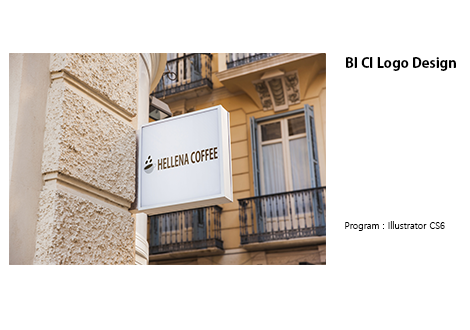
<style>
.page{position:relative;width:470px;height:330px;background:#ffffff}
.page>*{position:absolute;margin:0}
.t1{font:14px "AdobeGothicStd-Bold";color:#000000}
.t2{font:9px "MalgunGothic";color:#000000}
</style>
<div class="page">
<p class="t1" style="left:346px;top:57px;width:110px;height:14px">BI CI Logo Design</p>
<p class="t2" style="left:345px;top:221px;width:100px;height:10px">Program : Illustrator CS6</p>
</div>
